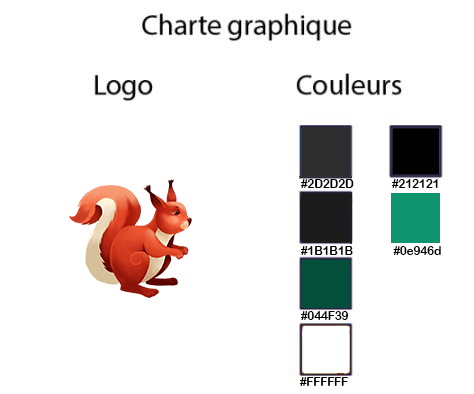
<style>
.page{position:relative;width:474px;height:394px;background:#ffffff}
.page>*{position:absolute;margin:0}
.t1{font:12px "ArialRoundedMTBold";letter-spacing:-0.025em;color:#000000}
</style>
<div class="page">
<p class="t1" style="left:301px;top:179px;width:53px;height:9px">#2D2D2D</p>
<p class="t1" style="left:392px;top:179px;width:46px;height:9px">#212121</p>
<p class="t1" style="left:301px;top:246px;width:52px;height:9px">#1B1B1B</p>
<p class="t1" style="left:393px;top:246px;width:48px;height:9px">#0e946d</p>
<p class="t1" style="left:301px;top:311px;width:48px;height:9px">#044F39</p>
<p class="t1" style="left:300px;top:377px;width:48px;height:9px">#FFFFFF</p>
</div>
